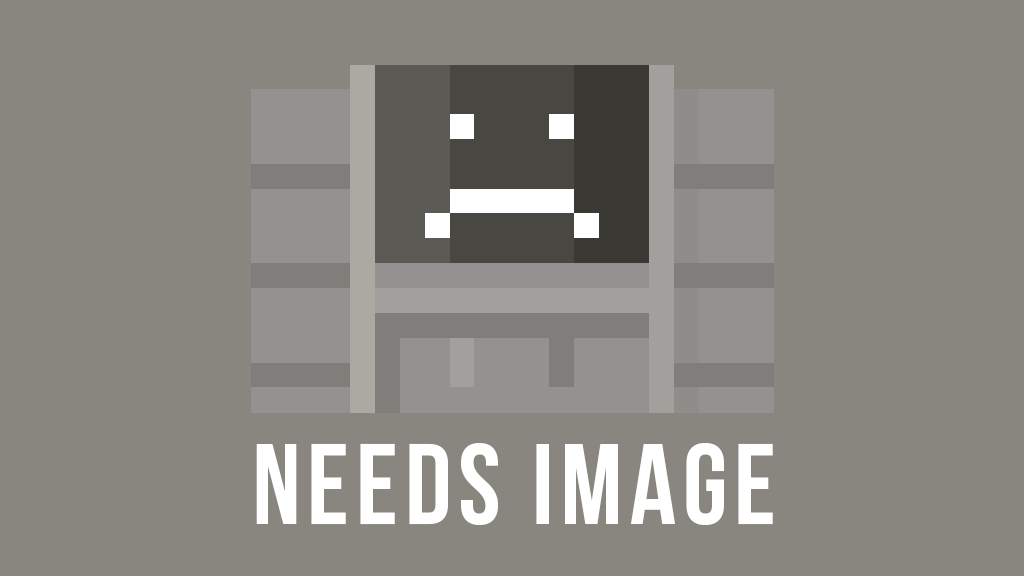
<style>
.page{position:relative;width:1024px;height:576px;background:#89867f}
.page>*{position:absolute;margin:0}
.t1{font:114.2px "BebasNeue";letter-spacing:0.06em;color:#ffffff}
</style>
<div class="page">
<p class="t1" style="left:256px;top:442px;width:517px;height:84px">Needs Image</p>
</div>
